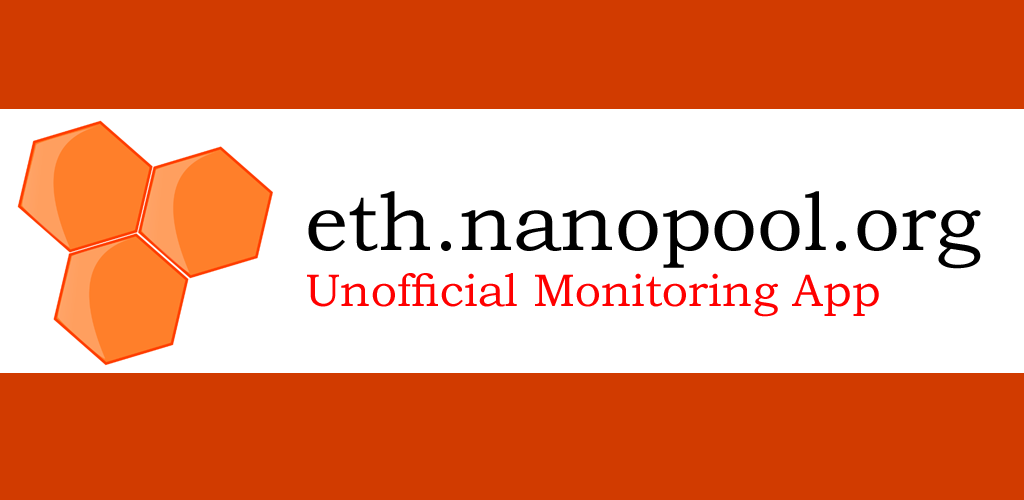
<style>
.page{position:relative;width:1024px;height:500px;background:#d13b00}
.page>*{position:absolute;margin:0}
.t1{font:46px "BookmanOldStyle";color:#ff0000}
.t2{font:82px "BookmanOldStyle";color:#000000}
</style>
<div class="page">
<p class="t1" style="left:307px;top:191px;width:674px;height:126px"><span class="t2">eth.nanopool.org<br></span>Unofficial Monitoring App</p>
</div>
